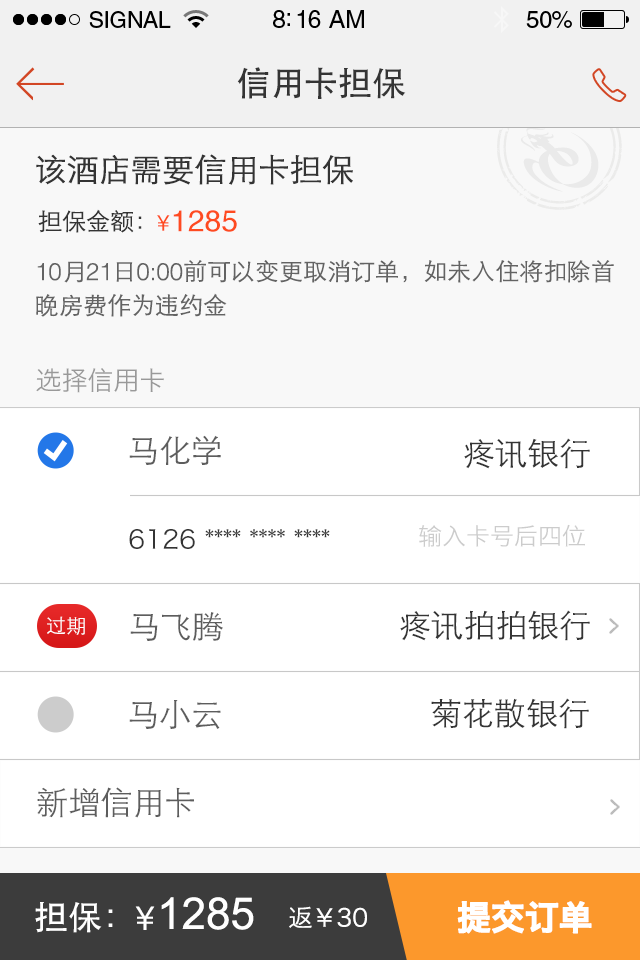
<style>
.page{position:relative;width:640px;height:960px;background:#ffffff}
.page>*{position:absolute;margin:0}
.t1{font:34px "STHeitiSC-Medium";color:#343434}
.t2{font:32px "STHeitiSC-Light";letter-spacing:-0.03em;color:#343434;font-weight:bold}
.t3{font:24px "STHeitiSC-Light";color:#343434}
.t4{font:22.4px "STHeitiSC-Medium";color:#fe4b20}
.t5{font:30px "Helvetica";color:#fe4b20}
.t6{font:24px/34px "STHeitiSC-Light";color:#636363}
.t7{font:24px/34px "Helvetica-Light";color:#636363}
.t8{font:26px "HiraginoSansGB-W3";color:#999999}
.t9{font:32px "STHeitiSC-Light";color:#5d5d5d}
.t10{font:32px "STHeitiSC-Light";color:#343434}
.t11{font:25.9px "HiraginoSansGB-W3";color:#343434}
.t12{font:23.9px "HiraginoSansGB-W3";color:#cccccc}
.t13{font:20px "STHeitiSC-Light";color:#ffffff}
.t14{font:34px "STHeitiSC-Medium";color:#ffffff}
.t15{font:44px "ArialMT";color:#ffffff}
.t16{font:34px "HiraginoSansGB-W6";letter-spacing:-0.03em;color:#ffffff;font-weight:bold}
.t17{font:24px "HiraginoSansGB-W3";color:#ffffff}
</style>
<div class="page">
<p class="t1" style="left:237px;top:67px;width:169px;height:32px">信用卡担保</p>
<p class="t2" style="left:36px;top:154px;width:317px;height:31px">该酒店需要信用卡担保</p>
<p class="t3" style="left:38px;top:209px;width:104px;height:24px">担保金额：</p>
<p class="t4" style="left:157px;top:215px;width:13px;height:16px">￥</p>
<p class="t5" style="left:173px;top:210px;width:64px;height:22px">1285</p>
<p class="t6" style="left:36px;top:260px;width:578px;height:57px;text-align:justify"><span class="t7">10</span>月<span class="t7">21</span>日<span class="t7">0:00</span>前可以变更取消订单，如未入住将扣除首<br>晚房费作为违约金</p>
<p class="t8" style="left:36px;top:368px;width:128px;height:25px">选择信用卡</p>
<p class="t9" style="left:129px;top:435px;width:92px;height:30px">马化学</p>
<p class="t10" style="left:464px;top:438px;width:126px;height:31px">疼讯银行</p>
<p class="t11" style="left:129px;top:529px;width:201px;height:20px">6126 **** **** ****</p>
<p class="t12" style="left:419px;top:524px;width:166px;height:23px">输入卡号后四位</p>
<p class="t13" style="left:47px;top:616px;width:38px;height:19px">过期</p>
<p class="t9" style="left:130px;top:612px;width:93px;height:29px">马飞腾</p>
<p class="t10" style="left:400px;top:610px;width:190px;height:31px">疼讯拍拍银行</p>
<p class="t9" style="left:129px;top:700px;width:92px;height:29px">马小云</p>
<p class="t10" style="left:431px;top:698px;width:158px;height:31px">菊花散银行</p>
<p class="t9" style="left:37px;top:787px;width:157px;height:31px">新增信用卡</p>
<p class="t14" style="left:35px;top:902px;width:78px;height:31px">担保：</p>
<p class="t15" style="left:161px;top:897px;width:93px;height:33px">1285</p>
<p class="t16" style="left:457px;top:900px;width:135px;height:34px">提交订单</p>
<p class="t14" style="left:135px;top:906px;width:20px;height:24px">￥</p>
<p class="t17" style="left:289px;top:906px;width:78px;height:22px">返￥30</p>
</div>
